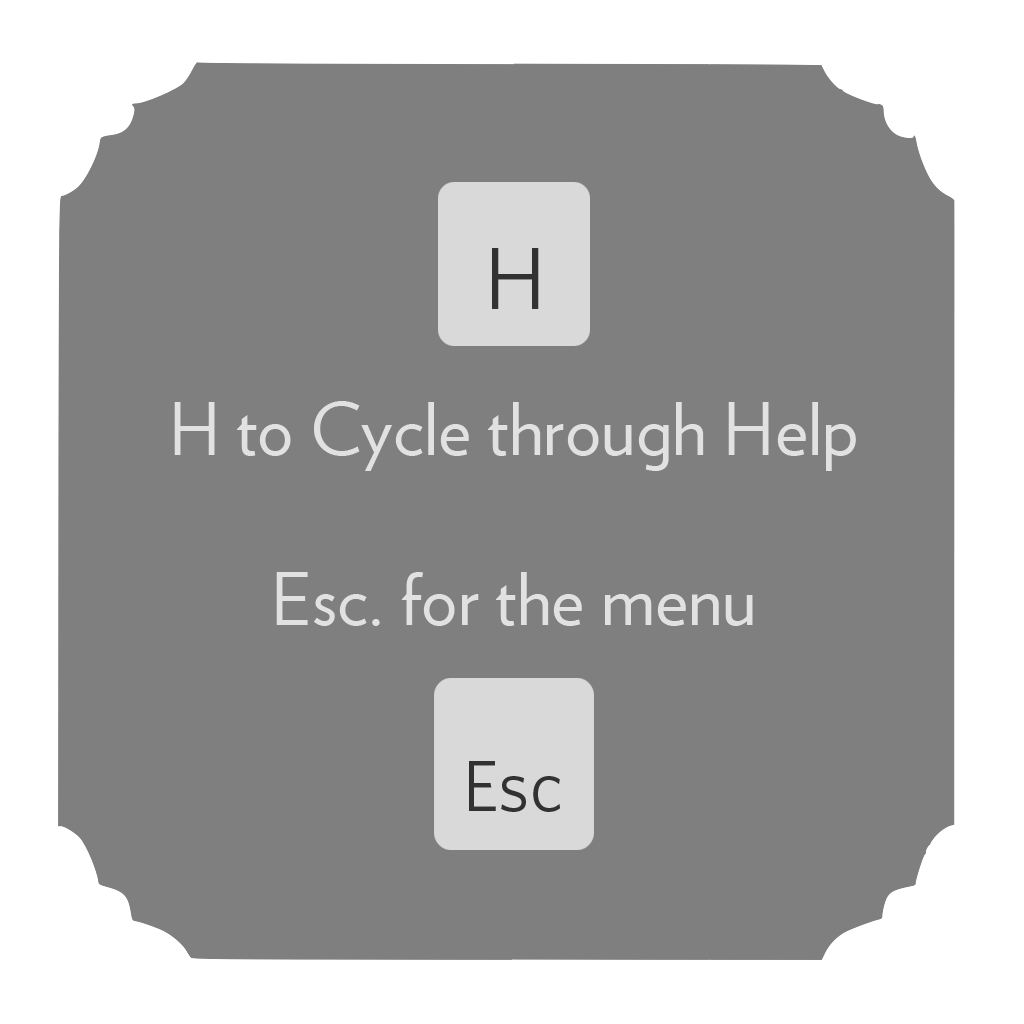
<style>
.page{position:relative;width:1024px;height:1024px;background:#7f7f7f}
.page>*{position:absolute;margin:0}
.t1{font:89px "WhitneyHTF-Book";color:#323232}
.t2{font:72px "Verlag-Book";color:#e1e1e1}
.t3{font:72px "WhitneyHTF-Book";color:#323232}
</style>
<div class="page">
<p class="t1" style="left:492px;top:248px;width:47px;height:61px">H</p>
<p class="t2" style="left:174px;top:401px;width:682px;height:70px">H to Cycle through Help</p>
<p class="t2" style="left:276px;top:572px;width:477px;height:54px">Esc. for the menu</p>
<p class="t3" style="left:469px;top:761px;width:91px;height:51px">Esc</p>
</div>
